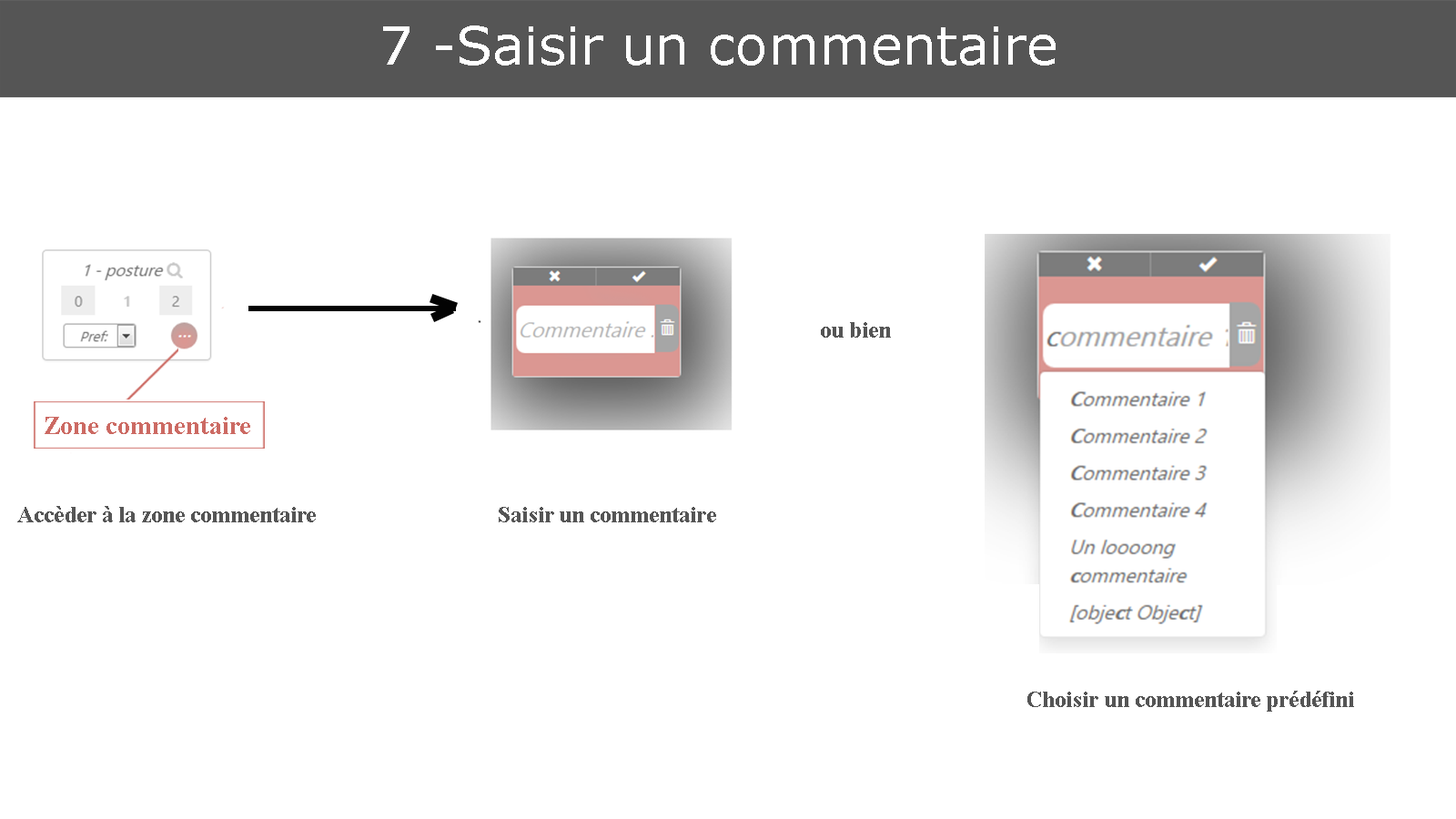
<style>
.page{position:relative;width:1456px;height:819px;background:#ffffff}
.page>*{position:absolute;margin:0}
.t1{font:53.1px "Verdana";color:#ffffff}
.t2{font:10.9px "TimesNewRomanPS-BoldMT";color:#555555}
.t3{font:26.5px "TimesNewRomanPS-BoldMT";color:#cc6a63}
</style>
<div class="page">
<p class="t1" style="left:383px;top:25px;width:673px;height:41px">7 -Saisir un commentaire</p>
<p class="t2" style="left:821px;top:322px;width:70px;height:16px">ou bien</p>
<p class="t3" style="left:45px;top:417px;width:205px;height:17px">Zone commentaire</p>
<p class="t2" style="left:17px;top:506px;width:299px;height:16px">Accèder à la zone commentaire</p>
<p class="t2" style="left:499px;top:507px;width:217px;height:15px">Saisir un commentaire</p>
<p class="t2" style="left:1027px;top:691px;width:327px;height:21px">Choisir un commentaire prédéfini</p>
</div>
